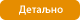
<style>
.page{position:relative;width:80px;height:20px;background:#e68d00}
.page>*{position:absolute;margin:0}
.t1{font:11px "MyriadPro-Semibold";color:#ffffff}
</style>
<div class="page">
<p class="t1" style="left:19px;top:5px;width:44px;height:10px">Детаљно</p>
</div>
